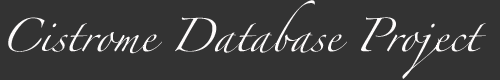
<style>
.page{position:relative;width:500px;height:80px;background:#333333}
.page>*{position:absolute;margin:0}
.t1{font:30px "Zapfino";color:#fefcfc}
</style>
<div class="page">
<p class="t1" style="left:8px;top:0px;width:478px;height:79px">Cistrome Database Project</p>
</div>
